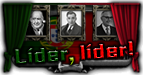
<style>
.page{position:relative;width:143px;height:75px}
.page>*{position:absolute;margin:0}
.t1{font:15.9px "FZZJ-WHJZTJW--GB1-0"}
</style>
<div class="page">
<p class="t1" style="left:14px;top:41px;width:119px;height:24px;rotate:-4deg">Líder, líder!</p>
</div>
